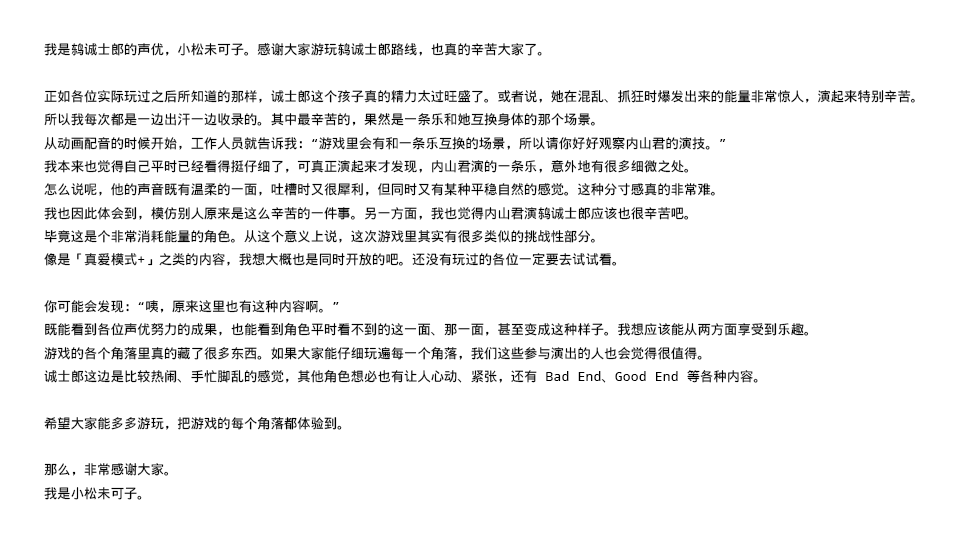
<style>
.page{position:relative;width:960px;height:544px;background:#ffffff}
.page>*{position:absolute;margin:0}
.t1{font:13.3px "WenQuanYiMicroHeiMono";color:#000000}
</style>
<div class="page">
<p class="t1" style="left:44px;top:43px;width:871px;height:457px">我是鸫诚士郎的声优，小松未可子。感谢大家游玩鸫诚士郎路线，也真的辛苦大家了。<br><br>正如各位实际玩过之后所知道的那样，诚士郎这个孩子真的精力太过旺盛了。或者说，她在混乱、抓狂时爆发出来的能量非常惊人，演起来特别辛苦。<br>所以我每次都是一边出汗一边收录的。其中最辛苦的，果然是一条乐和她互换身体的那个场景。<br>从动画配音的时候开始，工作人员就告诉我：“游戏里会有和一条乐互换的场景，所以请你好好观察内山君的演技。”<br>我本来也觉得自己平时已经看得挺仔细了，可真正演起来才发现，内山君演的一条乐，意外地有很多细微之处。<br>怎么说呢，他的声音既有温柔的一面，吐槽时又很犀利，但同时又有某种平稳自然的感觉。这种分寸感真的非常难。<br>我也因此体会到，模仿别人原来是这么辛苦的一件事。另一方面，我也觉得内山君演鸫诚士郎应该也很辛苦吧。<br>毕竟这是个非常消耗能量的角色。从这个意义上说，这次游戏里其实有很多类似的挑战性部分。<br>像是「真爱模式+」之类的内容，我想大概也是同时开放的吧。还没有玩过的各位一定要去试试看。<br><br>你可能会发现：“咦，原来这里也有这种内容啊。”<br>既能看到各位声优努力的成果，也能看到角色平时看不到的这一面、那一面，甚至变成这种样子。我想应该能从两方面享受到乐趣。<br>游戏的各个角落里真的藏了很多东西。如果大家能仔细玩遍每一个角落，我们这些参与演出的人也会觉得很值得。<br>诚士郎这边是比较热闹、手忙脚乱的感觉，其他角色想必也有让人心动、紧张，还有 Bad End、Good End 等各种内容。<br><br>希望大家能多多游玩，把游戏的每个角落都体验到。<br><br>那么，非常感谢大家。<br>我是小松未可子。</p>
</div>
